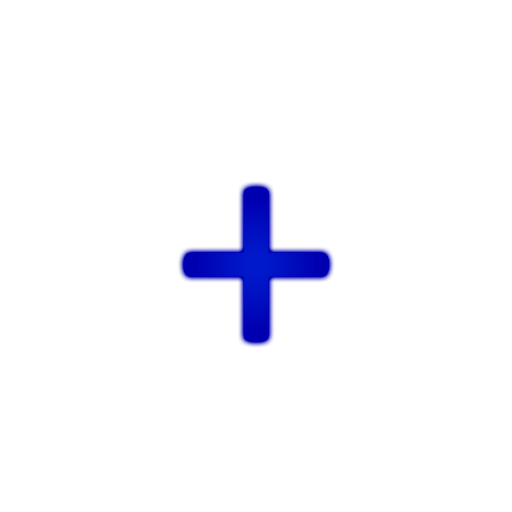
<style>
.page{position:relative;width:512px;height:512px;background:#ffffff}
.page>*{position:absolute;margin:0}
.t1{font:337px "Calibri";color:#000bbd}
</style>
<div class="page">
<p class="t1" style="left:183px;top:187px;width:146px;height:155px">+</p>
</div>
